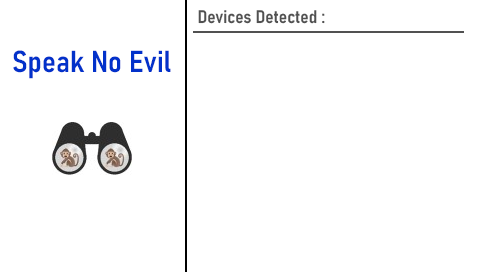
<style>
.page{position:relative;width:480px;height:272px;background:#ffffff}
.page>*{position:absolute;margin:0}
.t1{font:18px "Bahnschrift-SemiBoldSemiCondensed";color:#515151}
.t2{font:30px "Bahnschrift-SemiBoldSemiCondensed";color:#0231ca}
</style>
<div class="page">
<p class="t1" style="left:198px;top:10px;width:127px;height:14px">Devices Detected :</p>
<p class="t2" style="left:13px;top:50px;width:158px;height:29px">Speak No Evil</p>
</div>
